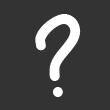
<style>
.page{position:relative;width:110px;height:110px;background:#333333}
.page>*{position:absolute;margin:0}
.t1{font:98px "Bromine";color:#ffffff}
</style>
<div class="page">
<p class="t1" style="left:35px;top:14px;width:46px;height:83px">?</p>
</div>
